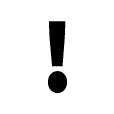
<style>
.page{position:relative;width:114px;height:114px;background:#ffffff}
.page>*{position:absolute;margin:0}
.t1{font:105px "SourceSansPro-Black";letter-spacing:-0.04em;color:#000000;scale:0.9 1}
</style>
<div class="page">
<p class="t1" style="left:48px;top:21px;width:19px;height:72px">!</p>
</div>
